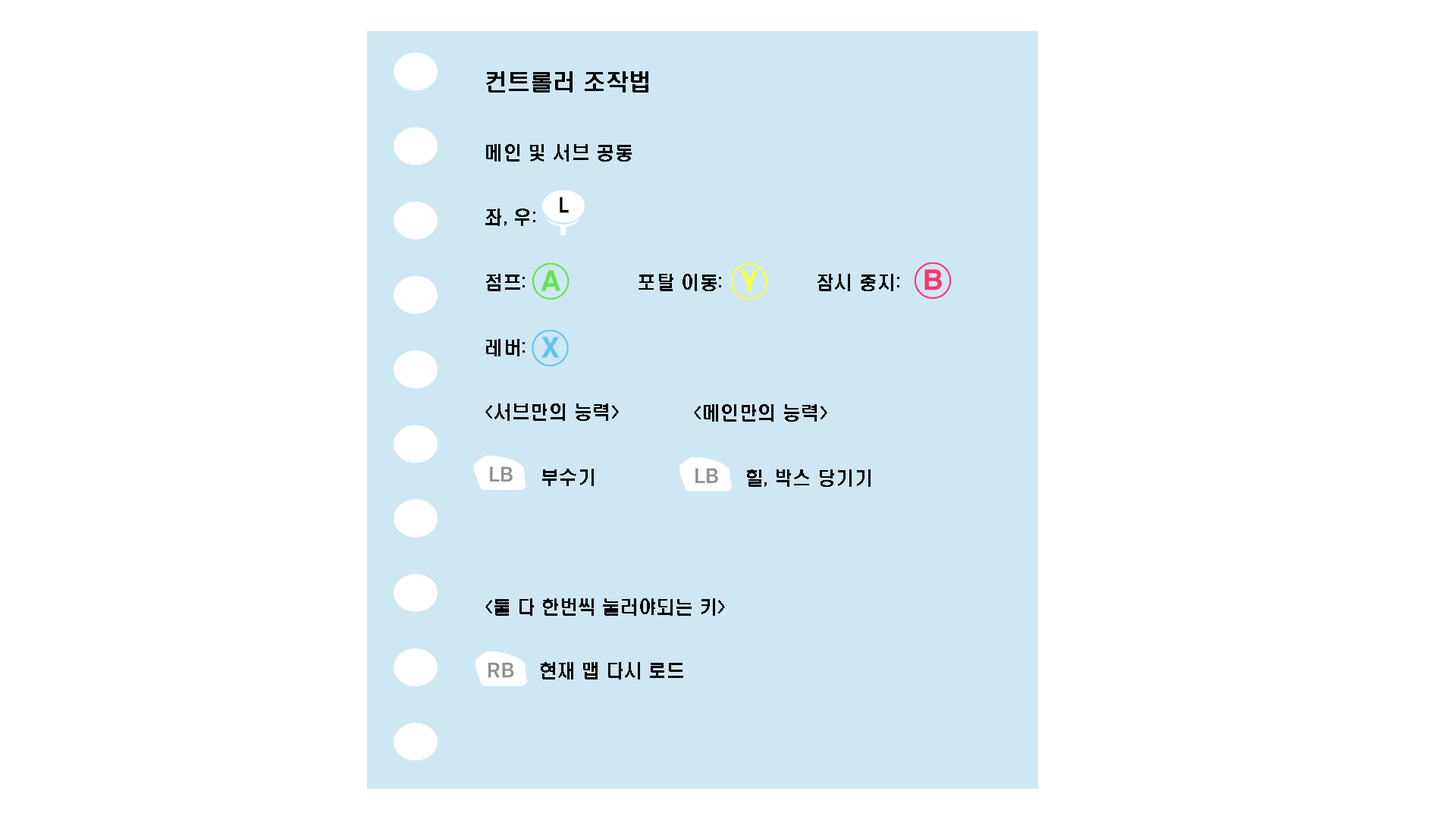
<style>
.page{position:relative;width:1456px;height:819px;background:#ffffff}
.page>*{position:absolute;margin:0}
.t1{font:18.6px "H2hdrM";color:#000000}
.t2{font:22.7px "H2hdrM";color:#000000}
.t3{font:18.2px "H2hdrM";color:#000000}
</style>
<div class="page">
<p class="t1" style="left:485px;top:71px;width:414px;height:608px"><span class="t2">컨트롤러 조작법<br></span><br>메인 및 서브 공동<br><br>좌, 우: <br><br>점프:                  포탈 이동:               잠시 중지: <br><br>레버: <br><br>&lt;서브만의 능력&gt;   <br>         <br> 부수기<br>         <br> <br><br><span class="t3">&lt;둘 다 한번씩 눌러야되는 키&gt;<br>         <br>         현재 맵 다시 로드</span></p>
<p class="t1" style="left:694px;top:404px;width:177px;height:83px">&lt;메인만의 능력&gt;<br>         <br>     힐, 박스 당기기</p>
</div>
